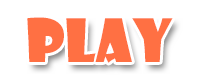
<style>
.page{position:relative;width:200px;height:80px;background:#ffffff}
.page>*{position:absolute;margin:0}
.t1{font:58.3px "ShowcardGothic-Reg";color:#ff7043}
</style>
<div class="page">
<p class="t1" style="left:27px;top:17px;width:146px;height:46px">PLAY</p>
</div>
